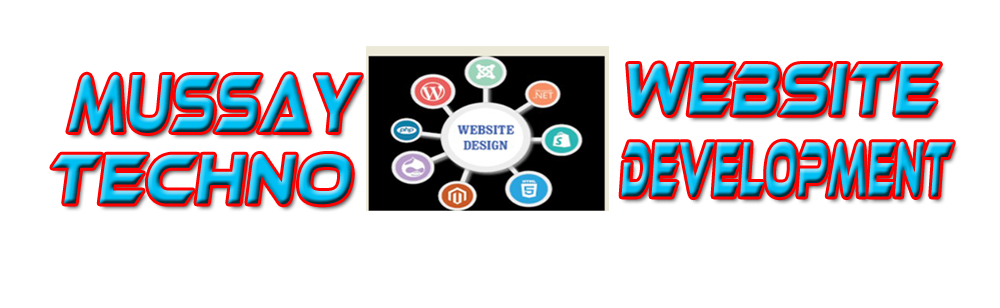
<style>
.page{position:relative;width:1000px;height:308px;background:#ffffff}
.page>*{position:absolute;margin:0}
.t1{font:74.8px "EthnocentricRg-Regular";letter-spacing:0.005em;font-weight:bold;font-style:italic;scale:0.66 1}
.t2{font:84.2px "EthnocentricRg-Regular";letter-spacing:0.005em;font-weight:bold;font-style:italic;scale:0.53 1}
.t3{font:80.1px "EthnocentricRg-Regular";letter-spacing:0.005em;font-weight:bold;font-style:italic;scale:0.38 1}
.t4{font:71.9px "EthnocentricRg-Regular";letter-spacing:0.005em;font-weight:bold;font-style:italic;scale:0.73 1}
</style>
<div class="page">
<p class="t1" style="left:628px;top:63px;width:312px;height:52px">website</p>
<p class="t2" style="left:68px;top:74px;width:293px;height:59px">mussay</p>
<p class="t3" style="left:621px;top:141px;width:332px;height:57px">development</p>
<p class="t4" style="left:52px;top:154px;width:300px;height:51px">techno</p>
</div>
